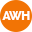
<style>
.page{position:relative;width:32px;height:32px;background:#f27405}
.page>*{position:absolute;margin:0}
.t1{font:11.5px "Raleway-ExtraBold";color:#ffffff}
.t2{font:11.5px "Raleway-ExtraBold";letter-spacing:-0.05em;color:#ffffff}
</style>
<div class="page">
<p class="t1" style="left:2px;top:11px;width:28px;height:9px"><span class="t2">A</span>WH</p>
</div>
